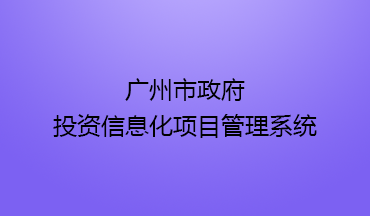
<style>
.page{position:relative;width:370px;height:216px}
.page>*{position:absolute;margin:0}
.t1{font:24px/36px "MicrosoftYaHei";color:#000000}
</style>
<div class="page">
<p class="t1" style="left:53px;top:78px;width:264px;height:60px;text-align:center">广州市政府<br>投资信息化项目管理系统</p>
</div>
